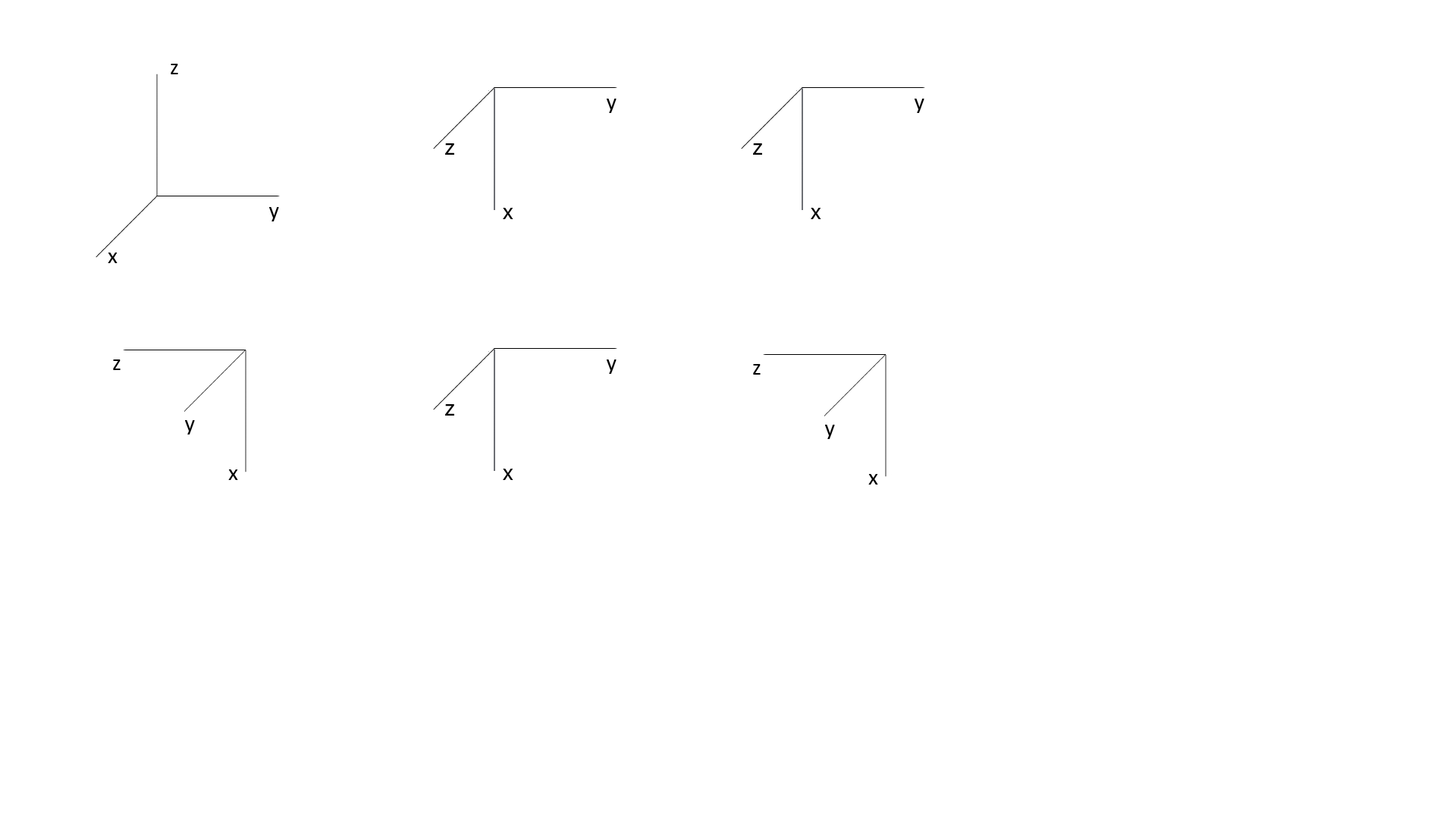
<style>
.page{position:relative;width:1456px;height:819px;background:#ffffff}
.page>*{position:absolute;margin:0}
.t1{font:22.7px "Calibri";color:#000000}
.t2{font:22.7px "MyriadHebrew-Regular";color:#000000}
</style>
<div class="page">
<p class="t1" style="left:171px;top:64px;width:7px;height:10px">z</p>
<p class="t1" style="left:607px;top:99px;width:10px;height:14px">y</p>
<p class="t1" style="left:915px;top:99px;width:9px;height:14px">y</p>
<p class="t2" style="left:445px;top:143px;width:9px;height:12px">z</p>
<p class="t2" style="left:753px;top:143px;width:9px;height:12px">z</p>
<p class="t1" style="left:269px;top:207px;width:10px;height:14px">y</p>
<p class="t2" style="left:503px;top:208px;width:10px;height:11px">x</p>
<p class="t2" style="left:811px;top:208px;width:10px;height:11px">x</p>
<p class="t1" style="left:108px;top:253px;width:10px;height:10px">x</p>
<p class="t1" style="left:113px;top:359px;width:8px;height:11px">z</p>
<p class="t1" style="left:607px;top:359px;width:10px;height:15px">y</p>
<p class="t1" style="left:753px;top:364px;width:8px;height:11px">z</p>
<p class="t2" style="left:445px;top:404px;width:9px;height:12px">z</p>
<p class="t1" style="left:185px;top:420px;width:10px;height:15px">y</p>
<p class="t1" style="left:825px;top:425px;width:10px;height:14px">y</p>
<p class="t1" style="left:228px;top:469px;width:10px;height:11px">x</p>
<p class="t2" style="left:503px;top:469px;width:10px;height:11px">x</p>
<p class="t1" style="left:868px;top:474px;width:10px;height:11px">x</p>
</div>
